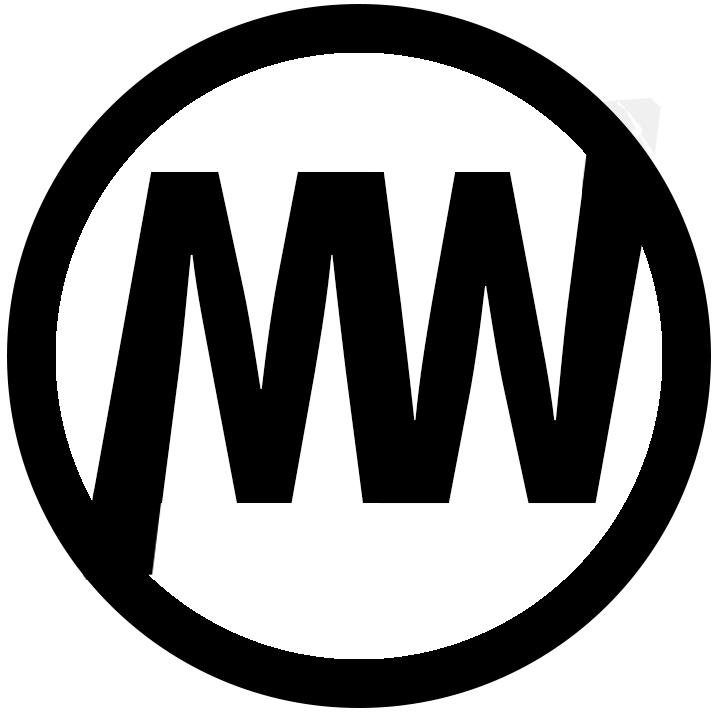
<style>
.page{position:relative;width:717px;height:717px;background:#ffffff}
.page>*{position:absolute;margin:0}
.t1{font:490.5px "MyriadPro-BoldCond";color:#000000;scale:1.05 1}
</style>
<div class="page">
<p class="t1" style="left:91px;top:171px;width:338px;height:332px">W</p>
<p class="t1" style="left:317px;top:172px;width:338px;height:332px;rotate:180deg">W</p>
</div>
